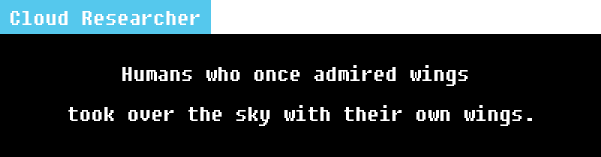
<style>
.page{position:relative;width:601px;height:157px;background:#000000}
.page>*{position:absolute;margin:0}
.t1{font:24px "DungGeunMo";color:#ffffff}
.t2{font:24px/40px "DungGeunMo";color:#ffffff}
</style>
<div class="page">
<p class="t1" style="left:10px;top:11px;width:190px;height:14px">Cloud Researcher</p>
<p class="t2" style="left:68px;top:65px;width:464px;height:61px;text-align:center">Humans who once admired wings <br>took over the sky with their own wings.</p>
</div>
